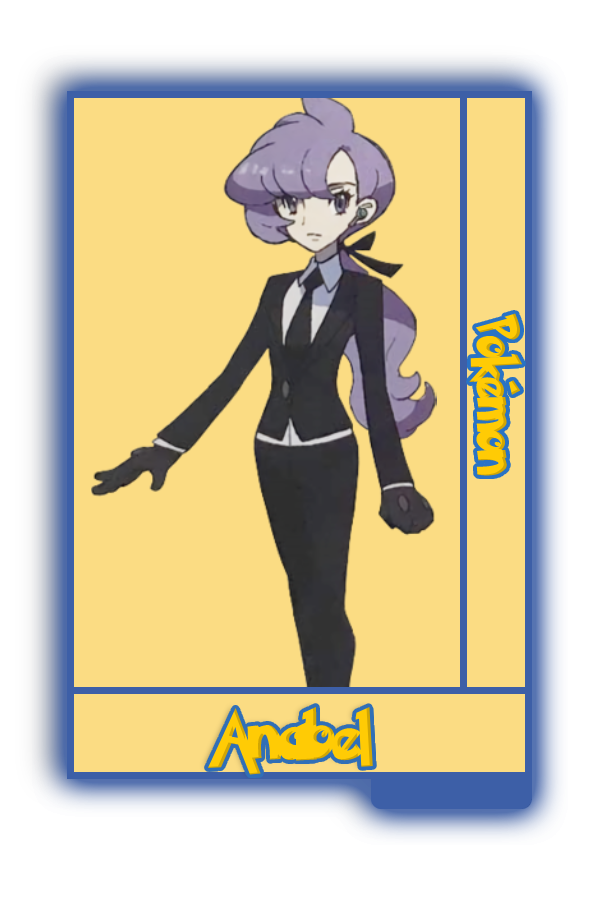
<style>
.page{position:relative;width:600px;height:900px;background:#fbdc83}
.page>*{position:absolute;margin:0}
.t1{font:48.8px "PokemonSolidNormal";color:#ffcb05;scale:0.8 1}
.t2{font:56.6px "PokemonSolidNormal";color:#ffcb05;scale:0.92 1}
</style>
<div class="page">
<p class="t1" style="left:469px;top:313px;width:54px;height:163px;rotate:90deg">Pokémon</p>
<p class="t2" style="left:207px;top:706px;width:166px;height:69px">Anabel</p>
</div>
